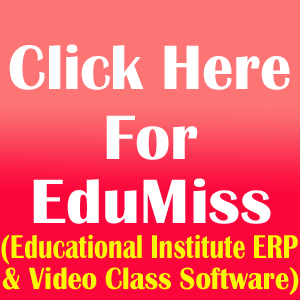
<style>
.page{position:relative;width:300px;height:300px;background:#fc7474}
.page>*{position:absolute;margin:0}
.t1{font:65px "BritannicBold";color:#ffffff;scale:0.96 1}
.t2{font:65px "BritannicBold";color:#ffffff}
.t3{font:34px "BritannicBold";color:#fbf806;scale:0.76 1}
.t4{font:31.9px "BritannicBold";color:#fbf806;scale:0.89 1}
</style>
<div class="page">
<p class="t1" style="left:9px;top:44px;width:281px;height:46px">Click Here</p>
<p class="t2" style="left:106px;top:115px;width:92px;height:45px">For</p>
<p class="t2" style="left:33px;top:178px;width:238px;height:46px">EduMiss</p>
<p class="t3" style="left:1px;top:234px;width:297px;height:31px">(Educational Institute ERP</p>
<p class="t4" style="left:2px;top:267px;width:297px;height:28px">&amp; Video Class Software)</p>
</div>
